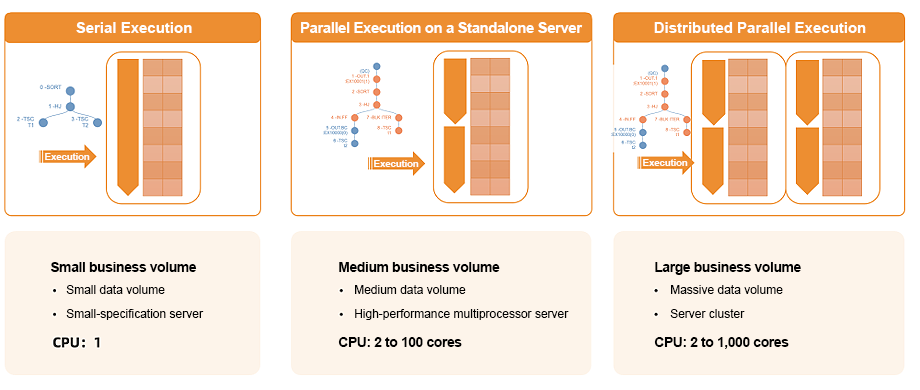
<style>
.page{position:relative;width:920px;height:390px;background:#ffffff}
.page>*{position:absolute;margin:0}
.t1{font:15px "Arial-BoldMT";color:#ffffff}
.t2{font:15px "Arial-BoldMT";letter-spacing:-0.03em;color:#ffffff}
.t3{font:10px "Arial-BoldMT";letter-spacing:-0.03em;color:#ffffff}
.t4{font:14px "Arial-BoldMT";letter-spacing:-0.03em;color:#000000}
.t5{font:12px/24px "ArialMT";color:#000000}
</style>
<div class="page">
<p class="t1" style="left:76px;top:22px;width:116px;height:11px">Serial Execution</p>
<p class="t2" style="left:301px;top:22px;width:282px;height:11px">Parallel Execution on a Standalone Server</p>
<p class="t1" style="left:654px;top:22px;width:212px;height:11px">Distributed Parallel Execution</p>
<p class="t3" style="left:45px;top:153px;width:45px;height:7px">Execution</p>
<p class="t3" style="left:374px;top:160px;width:45px;height:7px">Execution</p>
<p class="t3" style="left:643px;top:159px;width:45px;height:7px">Execution</p>
<p class="t4" style="left:51px;top:262px;width:146px;height:10px">Small business volume</p>
<p class="t4" style="left:339px;top:262px;width:161px;height:10px">Medium business volume</p>
<p class="t4" style="left:655px;top:262px;width:146px;height:13px">Large business volume</p>
<p class="t5" style="left:66px;top:285px;width:138px;height:35px">Small data volume<br>Small-specification server</p>
<p class="t5" style="left:355px;top:285px;width:214px;height:35px">Medium data volume<br>High-performance multiprocessor server</p>
<p class="t5" style="left:670px;top:285px;width:113px;height:33px">Massive data volume<br>Server cluster</p>
<p class="t4" style="left:338px;top:337px;width:124px;height:10px">CPU: 2 to 100 cores</p>
<p class="t4" style="left:654px;top:337px;width:135px;height:12px">CPU: 2 to 1,000 cores</p>
</div>
